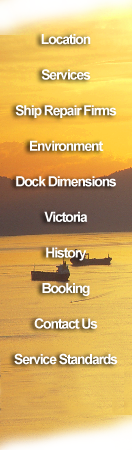
<style>
.page{position:relative;width:132px;height:450px}
.page>*{position:absolute;margin:0}
.t1{font:13.8px/35.6px "Arial-BoldMT";letter-spacing:-0.075em;color:#ffffff}
.t2{font:11.9px/35.6px "Arial-BoldMT";letter-spacing:-0.075em;color:#ffffff}
</style>
<div class="page">
<p class="t1" style="left:14px;top:34px;width:104px;height:331px;text-align:center"><span class="t2"><br></span>Location<br>Services<br>Ship Repair Firms<br>Environment<br>Dock Dimensions<br>Victoria<br>History<br>Booking<br>Contact Us<br>Service Standards</p>
</div>
